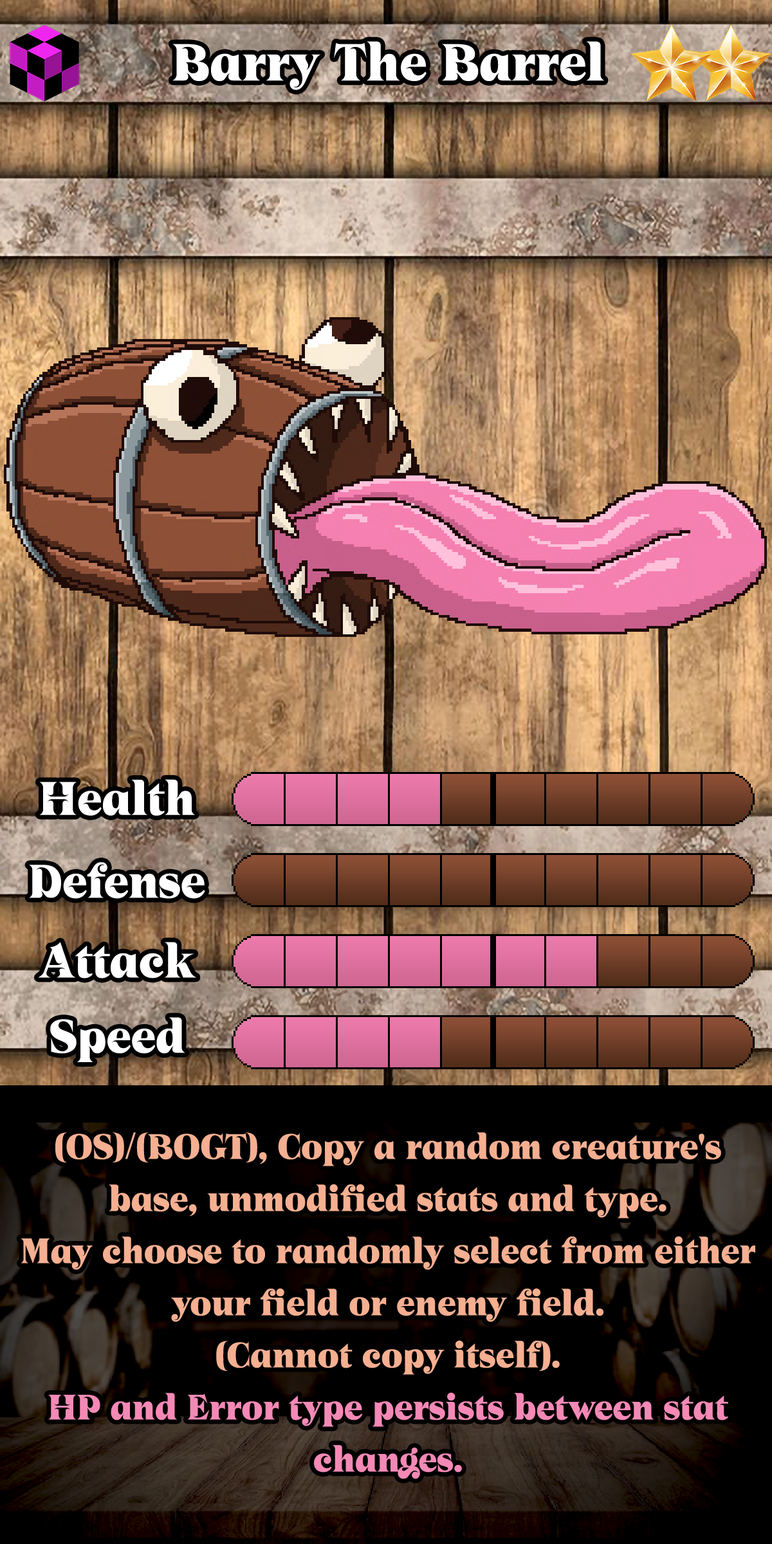
<style>
.page{position:relative;width:772px;height:1544px}
.page>*{position:absolute;margin:0}
.t1{font:88.8px "UTBarrel-Regular";color:#ffffff}
.t2{font:80.4px "UTBarrel-Regular";color:#ffffff}
.t3{font:60.5px/52.1px "UTBarrel-Regular";color:#f5af91}
.t4{font:60.5px/52.1px "UTBarrel-Regular";color:#f489b6}
</style>
<div class="page">
<p class="t1" style="left:172px;top:41px;width:432px;height:49px">Barry The Barrel</p>
<p class="t2" style="left:39px;top:779px;width:156px;height:37px">Health</p>
<p class="t2" style="left:29px;top:862px;width:176px;height:37px">Defense</p>
<p class="t2" style="left:38px;top:942px;width:158px;height:37px">Attack</p>
<p class="t2" style="left:50px;top:1017px;width:135px;height:45px">Speed</p>
<p class="t3" style="left:21px;top:1132px;width:734px;height:347px;text-align:center">(OS)/(BOGT), Copy a random creature's base, unmodified stats and type.<br>May choose to randomly select from either your field or enemy field.<br>(Cannot copy itself). <br><span class="t4">HP and Error type persists between stat changes.</span></p>
</div>
